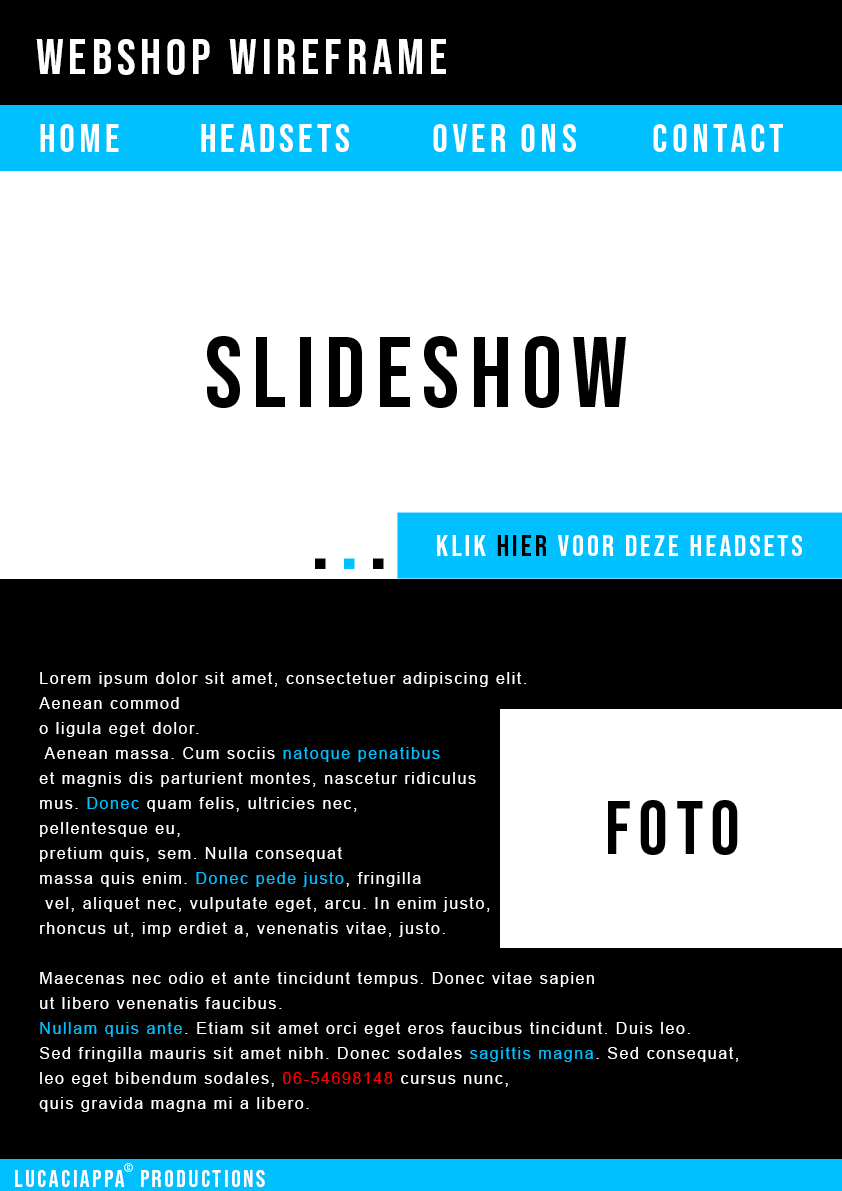
<style>
.page{position:relative;width:842px;height:1191px;background:#000000}
.page>*{position:absolute;margin:0}
.t1{font:50px "BebasNeue";letter-spacing:0.1em;color:#ffffff}
.t2{font:40px "BebasNeue-Regular";letter-spacing:0.1em;color:#ffffff}
.t3{font:40px "BebasNeue";letter-spacing:0.1em;color:#ffffff}
.t4{font:100px "BebasNeue-Regular";letter-spacing:0.1em;color:#000000}
.t5{font:30px "BebasNeue";letter-spacing:0.1em;color:#ffffff}
.t6{font:30px "BebasNeue";letter-spacing:0.1em;color:#000000}
.t7{font:100px "BebasNeue-Regular";letter-spacing:0.1em;color:#00c0ff}
.t8{font:16px/25px "ArialMT";letter-spacing:0.1em;color:#ffffff}
.t9{font:16px/25px "ArialMT";letter-spacing:0.1em;color:#00c0ff}
.t10{font:16px/25px "ArialMT";letter-spacing:0.1em;color:#ff0000}
.t11{font:75px "BebasNeue-Regular";letter-spacing:0.1em;color:#000000}
.t12{font:12.2px "BebasNeue-Regular";letter-spacing:0.1em;color:#ffffff}
.t13{font:24.4px "BebasNeue";letter-spacing:0.1em;color:#ffffff}
</style>
<div class="page">
<p class="t1" style="left:36px;top:39px;width:410px;height:36px">webshop wireframe</p>
<p class="t2" style="left:40px;top:124px;width:79px;height:28px">home</p>
<p class="t3" style="left:201px;top:124px;width:148px;height:28px">headsets</p>
<p class="t2" style="left:433px;top:124px;width:143px;height:28px">over ons</p>
<p class="t2" style="left:653px;top:124px;width:130px;height:28px">contact</p>
<p class="t4" style="left:207px;top:336px;width:419px;height:72px">slideshow</p>
<p class="t5" style="left:437px;top:535px;width:365px;height:21px">klik <span class="t6">hier</span> voor deze headsets</p>
<p class="t4" style="left:315px;top:558px;width:69px;height:11px">.<span class="t7">.</span>.</p>
<p class="t8" style="left:39px;top:672px;width:699px;height:440px;text-align:right">Lorem ipsum dolor sit amet, consectetuer adipiscing elit. <br>Aenean commod<br>o ligula eget dolor.<br> Aenean massa. Cum sociis <span class="t9">natoque penatibus</span> <br>et magnis dis parturient montes, nascetur ridiculus <br>mus. <span class="t9">Donec</span> quam felis, ultricies nec, <br>pellentesque eu, <br>pretium quis, sem. Nulla consequat <br>massa quis enim. <span class="t9">Donec pede justo</span>, fringilla<br> vel, aliquet nec, vulputate eget, arcu. In enim justo,<br>rhoncus ut, imp erdiet a, venenatis vitae, justo.<br><br>Maecenas nec odio et ante tincidunt tempus. Donec vitae sapien <br>ut libero venenatis faucibus. <br><span class="t9">Nullam quis ante</span>. Etiam sit amet orci eget eros faucibus tincidunt. Duis leo.<br>Sed fringilla mauris sit amet nibh. Donec sodales <span class="t9">sagittis magna</span>. Sed consequat, <br>leo eget bibendum sodales, <span class="t10">06-54698148</span> cursus nunc, <br>quis gravida magna mi a libero.</p>
<p class="t11" style="left:608px;top:800px;width:130px;height:55px">foto</p>
<p class="t12" style="left:124px;top:1163px;width:9px;height:9px">©</p>
<p class="t13" style="left:15px;top:1170px;width:250px;height:17px">LucaCiappa  productions</p>
</div>
